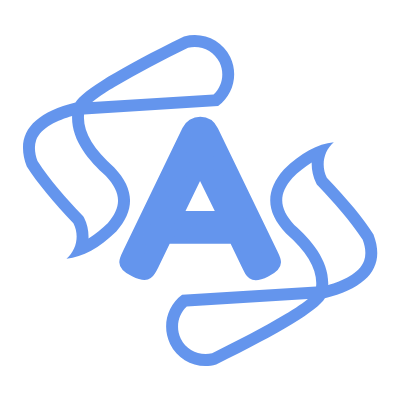
<style>
.page{position:relative;width:400px;height:400px;background:#ffffff}
.page>*{position:absolute;margin:0}
.t1{font:220px "FredokaOne-Regular";color:#6495ed}
</style>
<div class="page">
<p class="t1" style="left:119px;top:116px;width:162px;height:165px">A</p>
</div>
